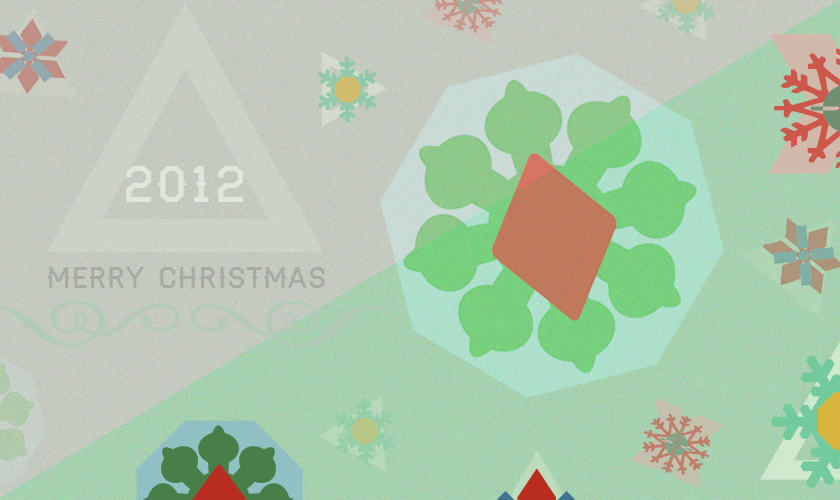
<style>
.page{position:relative;width:840px;height:500px}
.page>*{position:absolute;margin:0}
.t1{font:49.4px "Haymaker";color:#e0e7dc}
.t2{font:27.9px "Haymaker";color:#a8aca3}
</style>
<div class="page">
<p class="t1" style="left:126px;top:166px;width:118px;height:36px">2012</p>
<p class="t2" style="left:47px;top:267px;width:278px;height:21px">MERRY CHRISTMAS</p>
</div>
